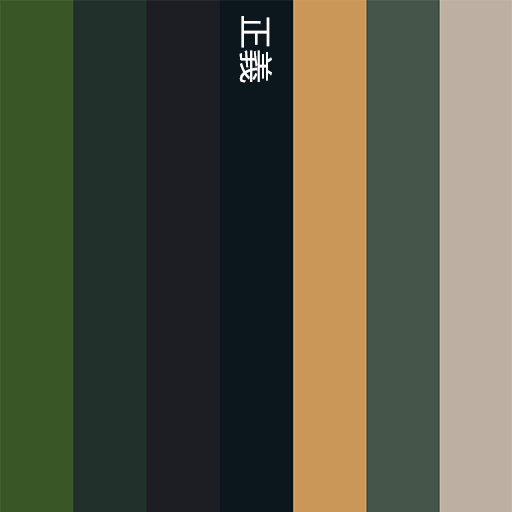
<style>
.page{position:relative;width:512px;height:512px}
.page>*{position:absolute;margin:0}
.t1{font:34.2px "KozGoPr6N-Regular";color:#ffffff}
</style>
<div class="page">
<p class="t1" style="left:239px;top:16px;width:33px;height:67px;rotate:90deg">正義</p>
</div>
